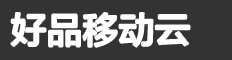
<style>
.page{position:relative;width:232px;height:60px;background:#333333}
.page>*{position:absolute;margin:0}
.t1{font:36px "FZLTZHK--GBK1-0";color:#ffffff}
</style>
<div class="page">
<p class="t1" style="left:11px;top:13px;width:179px;height:34px">好品移动云</p>
</div>
